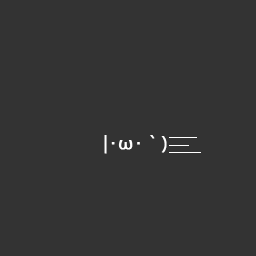
<style>
.page{position:relative;width:256px;height:256px;background:#333333}
.page>*{position:absolute;margin:0}
.t1{font:16.7px "MicrosoftYaHei";color:#ffffff;font-weight:bold}
</style>
<div class="page">
<p class="t1" style="left:104px;top:135px;width:63px;height:19px">|･ω･｀)</p>
</div>
